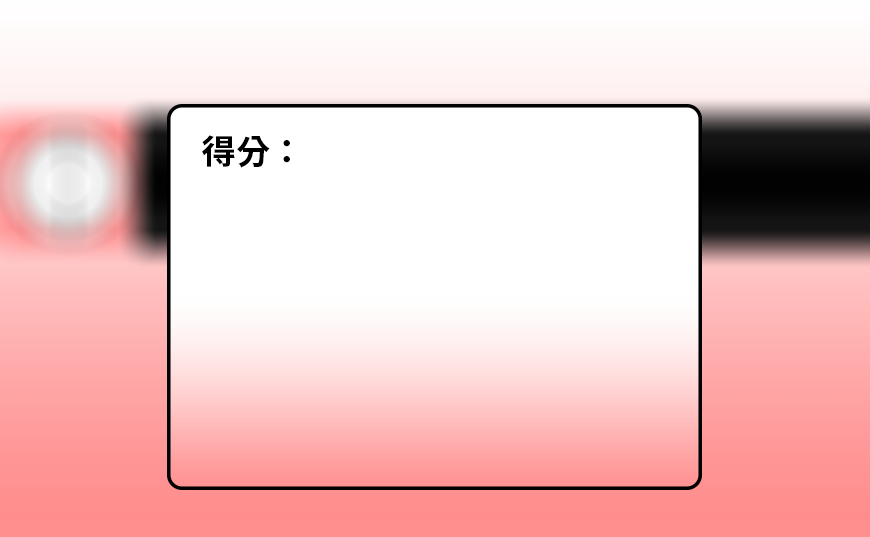
<style>
.page{position:relative;width:870px;height:537px;background:#ffffff}
.page>*{position:absolute;margin:0}
.t1{font:33.9px "NotoSansHant-Bold";color:#000000}
</style>
<div class="page">
<p class="t1" style="left:202px;top:135px;width:88px;height:33px">得分：</p>
</div>
